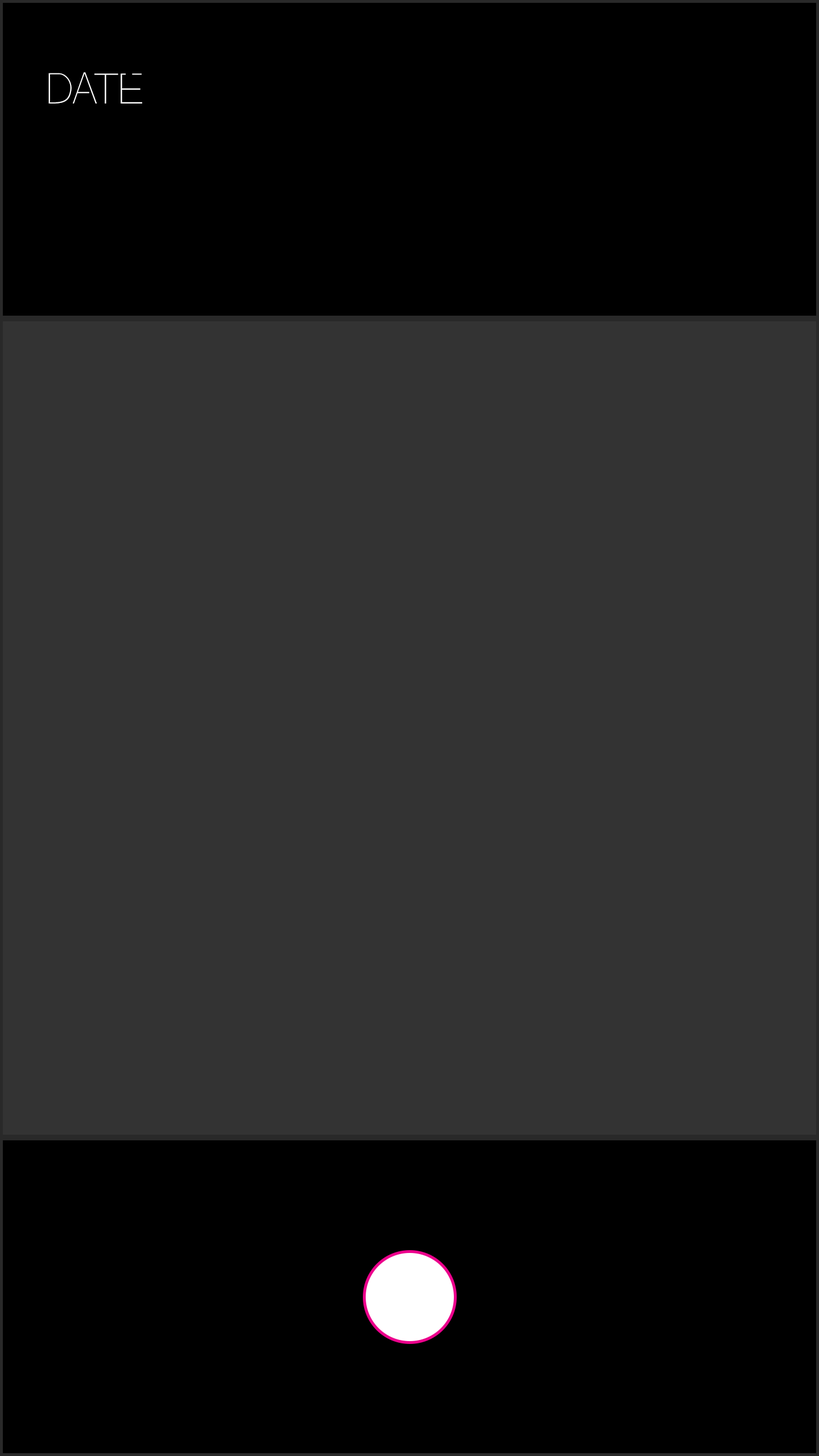
<style>
.page{position:relative;width:819px;height:1456px;background:#333333}
.page>*{position:absolute;margin:0}
.t1{font:42.7px "PresaUltralight";color:#ffffff}
</style>
<div class="page">
<p class="t1" style="left:48px;top:72px;width:94px;height:32px">DATE</p>
</div>
